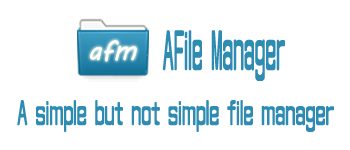
<style>
.page{position:relative;width:350px;height:150px;background:#ffffff}
.page>*{position:absolute;margin:0}
.t1{font:48px "MFYingHua_Noncommercial-Regular";color:#2e8bb2;scale:0.78 1}
.t2{font:30px "MFYingHua_Noncommercial-Regular";color:#2e8bb2;scale:1.17 1}
</style>
<div class="page">
<p class="t1" style="left:162px;top:30px;width:123px;height:51px">AFile Manager</p>
<p class="t2" style="left:17px;top:100px;width:317px;height:32px">A simple but not simple file manager</p>
</div>
